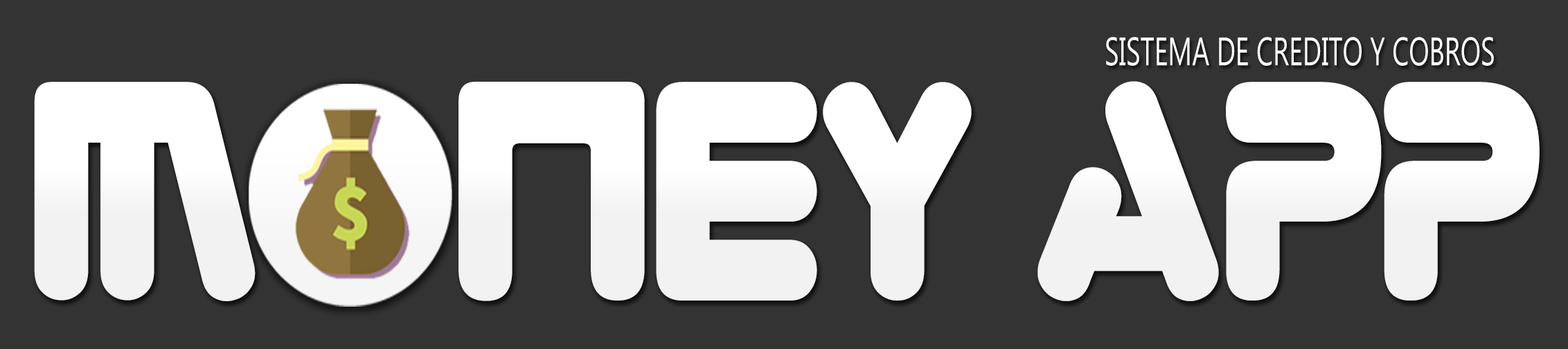
<style>
.page{position:relative;width:1568px;height:349px;background:#333333}
.page>*{position:absolute;margin:0}
.t1{font:16.3px "Ebrima";color:#ffffff;text-transform:uppercase;scale:0.68 1}
.t2{font:150.5px "Zorque";color:#ffffff;text-transform:uppercase;scale:0.89 1}
</style>
<div class="page">
<p class="t1" style="left:1106px;top:37px;width:388px;height:29px">Sistema de credito y cobros</p>
<p class="t2" style="left:34px;top:81px;width:1506px;height:220px">M   ney App</p>
</div>
